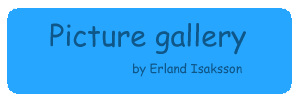
<style>
.page{position:relative;width:300px;height:100px;background:#26a6ff}
.page>*{position:absolute;margin:0}
.t1{font:29.2px "ComicSansMS";color:#0f5789}
.t2{font:12.5px "ComicSansMS";color:#0f5789}
</style>
<div class="page">
<p class="t1" style="left:50px;top:23px;width:196px;height:32px">Picture gallery</p>
<p class="t2" style="left:133px;top:63px;width:109px;height:14px">by Erland Isaksson</p>
</div>
